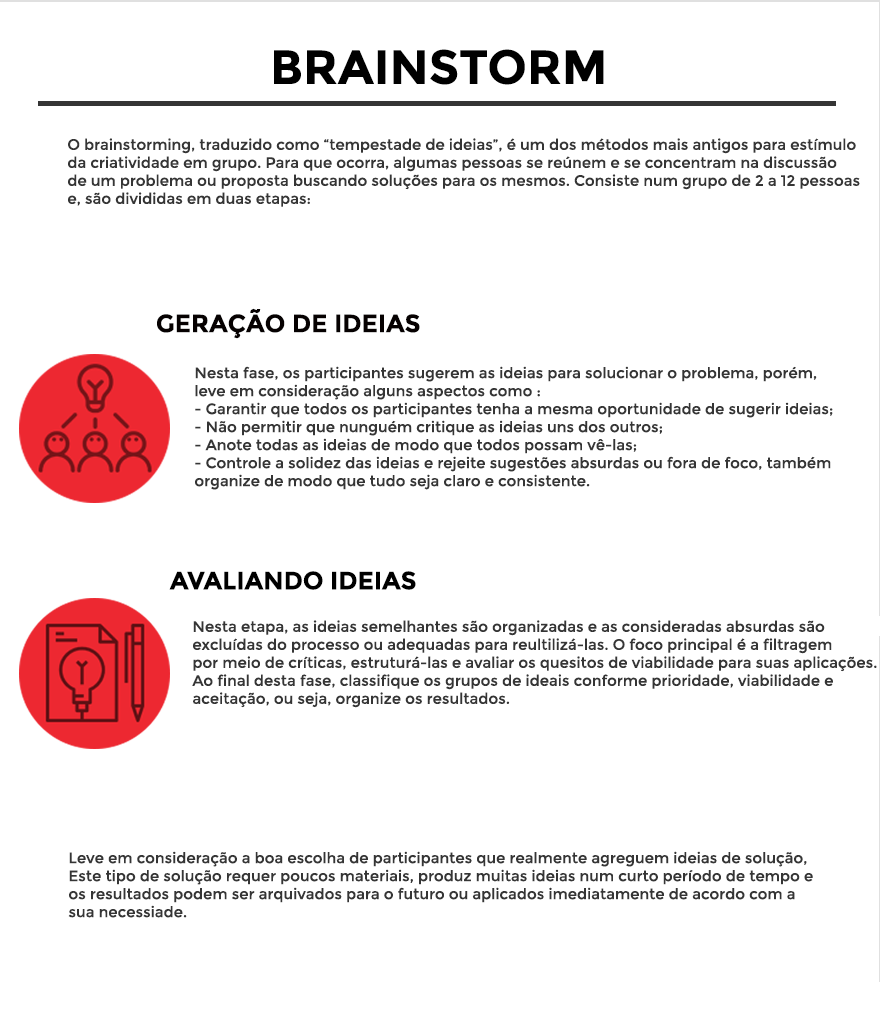
<style>
.page{position:relative;width:880px;height:1034px;background:#ffffff}
.page>*{position:absolute;margin:0}
.t1{font:48px "Montserrat-Bold";color:#000000}
.t2{font:15px "Montserrat-Regular";color:#353535}
.t3{font:25px "Montserrat-Bold";color:#060101}
.t4{font:25px "Montserrat-Bold";color:#000000}
</style>
<div class="page">
<p class="t1" style="left:274px;top:49px;width:330px;height:36px">BRAINSTORM</p>
<p class="t2" style="left:68px;top:138px;width:792px;height:69px">O brainstorming, traduzido como “tempestade de ideias”, é um dos métodos mais antigos para estímulo <br>da criatividade em grupo. Para que ocorra, algumas pessoas se reúnem e se concentram na discussão<br>de um problema ou proposta buscando soluções para os mesmos. Consiste num grupo de 2 a 12 pessoas<br>e, são divididas em duas etapas:</p>
<p class="t3" style="left:157px;top:308px;width:263px;height:31px">GERAÇÃO DE IDEIAS</p>
<p class="t2" style="left:195px;top:366px;width:638px;height:124px">Nesta fase, os participantes sugerem as ideias para solucionar o problema, porém,<br>leve em consideração alguns aspectos como : <br>- Garantir que todos os participantes tenha a mesma oportunidade de sugerir ideias;<br>- Não permitir que nunguém critique as ideias uns dos outros;<br>- Anote todas as ideias de modo que todos possam vê-las;<br>- Controle a solidez das ideias e rejeite sugestões absurdas ou fora de foco, também <br>organize de modo que tudo seja claro e consistente.</p>
<p class="t4" style="left:169px;top:571px;width:247px;height:19px">AVALIANDO IDEIAS</p>
<p class="t2" style="left:192px;top:620px;width:685px;height:88px">Nesta etapa, as ideias semelhantes são organizadas e as consideradas absurdas são <br>excluídas do processo ou adequadas para reultilizá-las. O foco principal é a filtragem<br>por meio de críticas, estruturá-las e avaliar os quesitos de viabilidade para suas aplicações.<br>Ao final desta fase, classifique os grupos de ideais conforme prioridade, viabilidade e<br>aceitação, ou seja, organize os resultados.</p>
<p class="t2" style="left:68px;top:851px;width:745px;height:67px">Leve em consideração a boa escolha de participantes que realmente agreguem ideias de solução,<br>Este tipo de solução requer poucos materiais, produz muitas ideias num curto período de tempo e <br>os resultados podem ser arquivados para o futuro ou aplicados imediatamente de acordo com a <br>sua necessiade.</p>
</div>
